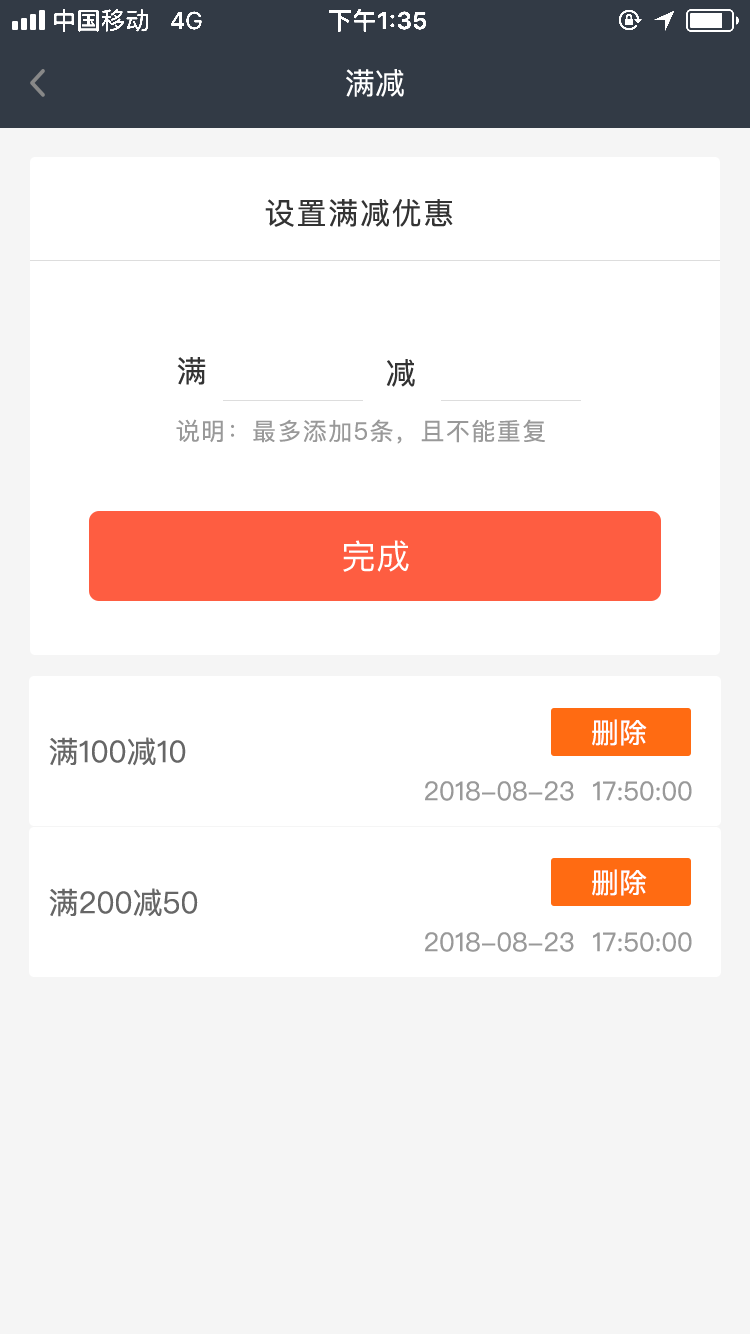
<style>
.page{position:relative;width:750px;height:1334px;background:#ffffff}
.page>*{position:absolute;margin:0}
.t1{font:30px "PingFangSC-Regular";letter-spacing:0.06em;color:#333333}
.t2{font:24px "PingFangSC-Regular";letter-spacing:0.06em;color:#999999}
.t3{font:34px "PingFangSC-Regular";letter-spacing:0.02em;color:#ffffff}
.t4{font:28px "PingFang-SC-Medium";color:#ffffff}
.t5{font:30px "PingFangSC-Regular";color:#666666}
.t6{font:26px "PingFangSC-Regular";color:#999999}
</style>
<div class="page">
<p class="t1" style="left:265px;top:199px;width:188px;height:28px">设置满减优惠</p>
<p class="t1" style="left:177px;top:357px;width:29px;height:28px">满</p>
<p class="t1" style="left:386px;top:359px;width:29px;height:28px">减</p>
<p class="t2" style="left:176px;top:419px;width:369px;height:25px">说明：最多添加5条，且不能重复</p>
<p class="t3" style="left:343px;top:540px;width:66px;height:32px">完成</p>
<p class="t4" style="left:592px;top:719px;width:55px;height:27px">删除</p>
<p class="t5" style="left:49px;top:737px;width:137px;height:29px">满100减10</p>
<p class="t6" style="left:425px;top:781px;width:267px;height:20px">2018-08-23  17:50:00</p>
<p class="t4" style="left:592px;top:869px;width:55px;height:27px">删除</p>
<p class="t5" style="left:49px;top:888px;width:149px;height:29px">满200减50</p>
<p class="t6" style="left:425px;top:932px;width:267px;height:20px">2018-08-23  17:50:00</p>
</div>
